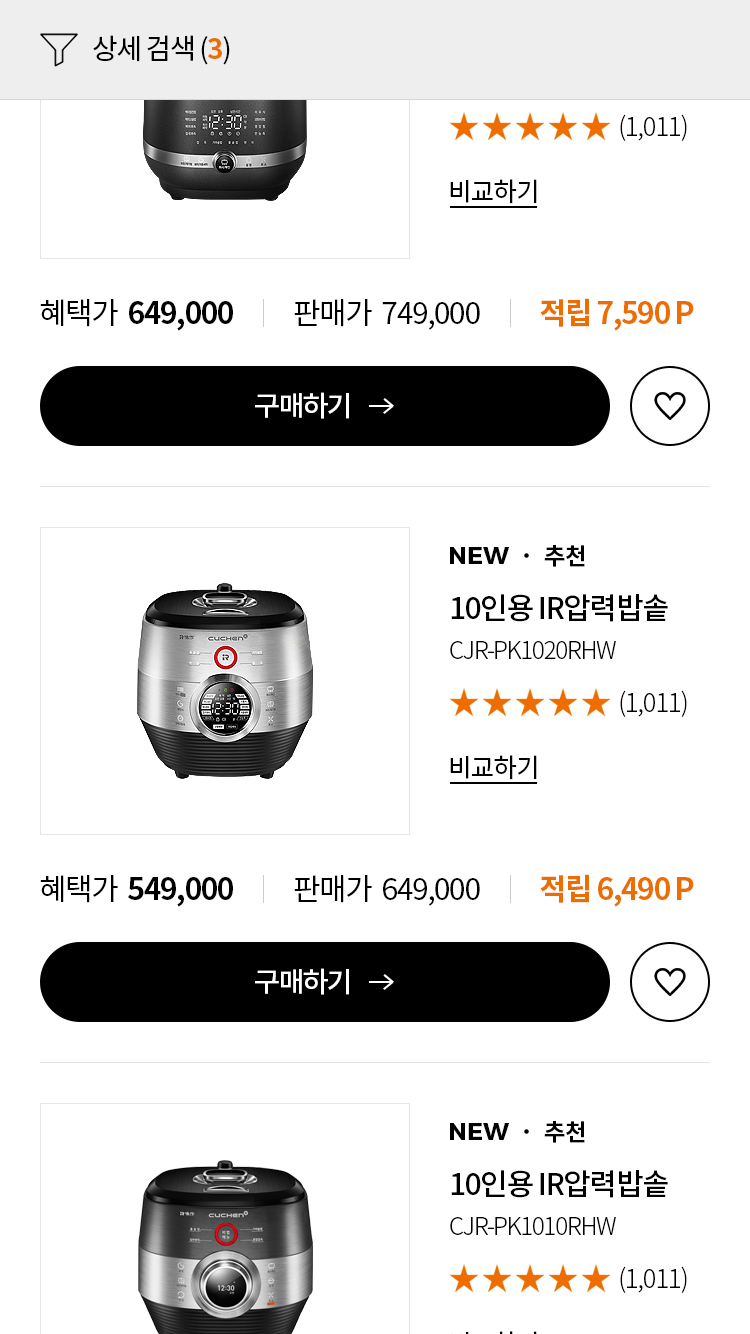
<style>
.page{position:relative;width:750px;height:1334px;background:#ffffff}
.page>*{position:absolute;margin:0}
.t1{font:28px "NotoSansCJKkr-Regular";letter-spacing:-0.05em;color:#000000}
.t2{font:28px "NotoSansCJKkr-Bold";letter-spacing:-0.05em;color:#ed6d00}
.t3{font:26px "NotoSansCJKkr-Light";letter-spacing:-0.05em;color:#000000}
.t4{font:26px "NotoSansCJKkr-Regular";letter-spacing:-0.05em;color:#000000}
.t5{font:30px "NotoSansCJKkr-Bold";letter-spacing:-0.05em;color:#000000}
.t6{font:30px "NotoSansCJKkr-Regular";letter-spacing:-0.05em;color:#000000}
.t7{font:30px "NotoSansCJKkr-Bold";letter-spacing:-0.05em;color:#ed6d00}
.t8{font:28px "NotoSansCJKkr-Medium";letter-spacing:-0.05em;color:#ffffff}
.t9{font:24px "NotoSansCJKkr-Bold";letter-spacing:-0.05em;color:#000000}
.t10{font:24px "Montserrat-Bold";color:#000000}
.t11{font:30px "NotoSansCJKkr-Medium";letter-spacing:-0.05em;color:#000000}
.t12{font:24px "NotoSansCJKkr-Light";letter-spacing:-0.05em;color:#000000}
</style>
<div class="page">
<p class="t1" style="left:93px;top:35px;width:137px;height:30px">상세 검색 (<span class="t2">3</span>)</p>
<p class="t3" style="left:620px;top:114px;width:67px;height:27px">(1,011)</p>
<p class="t4" style="left:450px;top:179px;width:87px;height:25px">비교하기</p>
<p class="t5" style="left:40px;top:299px;width:193px;height:32px"><span class="t6">혜택가  </span>649,000</p>
<p class="t6" style="left:294px;top:299px;width:186px;height:31px">판매가  749,000</p>
<p class="t7" style="left:540px;top:298px;width:154px;height:33px">적립 7,590 P</p>
<p class="t8" style="left:255px;top:392px;width:94px;height:27px">구매하기</p>
<p class="t9" style="left:544px;top:545px;width:41px;height:22px">추천</p>
<p class="t10" style="left:450px;top:547px;width:60px;height:17px">NEW</p>
<p class="t11" style="left:451px;top:594px;width:217px;height:28px">10인용 IR압력밥솥</p>
<p class="t12" style="left:450px;top:641px;width:166px;height:18px">CJR-PK1020RHW</p>
<p class="t3" style="left:620px;top:690px;width:67px;height:27px">(1,011)</p>
<p class="t4" style="left:450px;top:755px;width:87px;height:25px">비교하기</p>
<p class="t5" style="left:40px;top:875px;width:193px;height:32px"><span class="t6">혜택가  </span>549,000</p>
<p class="t6" style="left:294px;top:875px;width:186px;height:31px">판매가  649,000</p>
<p class="t7" style="left:540px;top:874px;width:154px;height:33px">적립 6,490 P</p>
<p class="t8" style="left:255px;top:968px;width:94px;height:27px">구매하기</p>
<p class="t9" style="left:544px;top:1121px;width:41px;height:22px">추천</p>
<p class="t10" style="left:450px;top:1123px;width:60px;height:17px">NEW</p>
<p class="t11" style="left:451px;top:1170px;width:217px;height:28px">10인용 IR압력밥솥</p>
<p class="t12" style="left:450px;top:1217px;width:166px;height:18px">CJR-PK1010RHW</p>
<p class="t3" style="left:620px;top:1266px;width:67px;height:27px">(1,011)</p>
</div>
